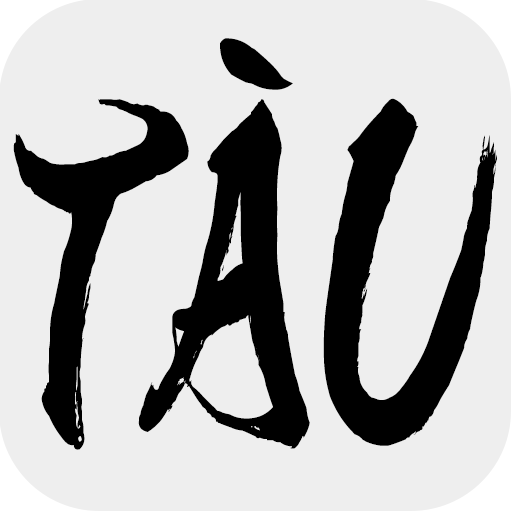
<style>
.page{position:relative;width:512px;height:512px;background:#eeeeee}
.page>*{position:absolute;margin:0}
.t1{font:330px "KsoTouryuN";letter-spacing:0.05em;color:#000000}
.t2{font:350px "KsoTouryuN";letter-spacing:-0.15em;color:#000000}
.t3{font:350px "KsoTouryuN";letter-spacing:-0.1em;color:#000000}
</style>
<div class="page">
<p class="t1" style="left:220px;top:38px;width:73px;height:52px">`</p>
<p class="t2" style="left:13px;top:99px;width:297px;height:351px">TA</p>
<p class="t3" style="left:323px;top:98px;width:174px;height:348px">U</p>
</div>
